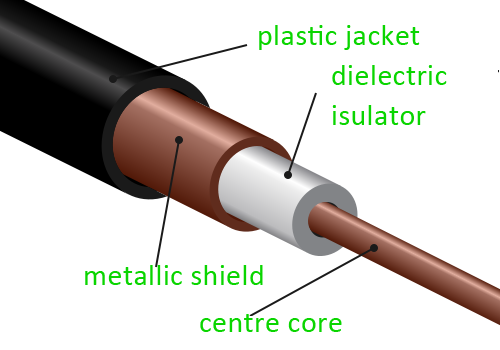
<style>
.page{position:relative;width:500px;height:350px;background:#ffffff}
.page>*{position:absolute;margin:0}
.t1{font:30px "Calibri";letter-spacing:0.015em;color:#0ad500}
.t2{font:30px/40.1px "Calibri";letter-spacing:0.015em;color:#0ad500}
</style>
<div class="page">
<p class="t1" style="left:259px;top:25px;width:161px;height:25px">plastic jacket</p>
<p class="t2" style="left:332px;top:65px;width:115px;height:60px">dielectric <br>isulator</p>
<p class="t1" style="left:85px;top:265px;width:178px;height:20px">metallic shield</p>
<p class="t1" style="left:200px;top:314px;width:142px;height:18px">centre core</p>
</div>
